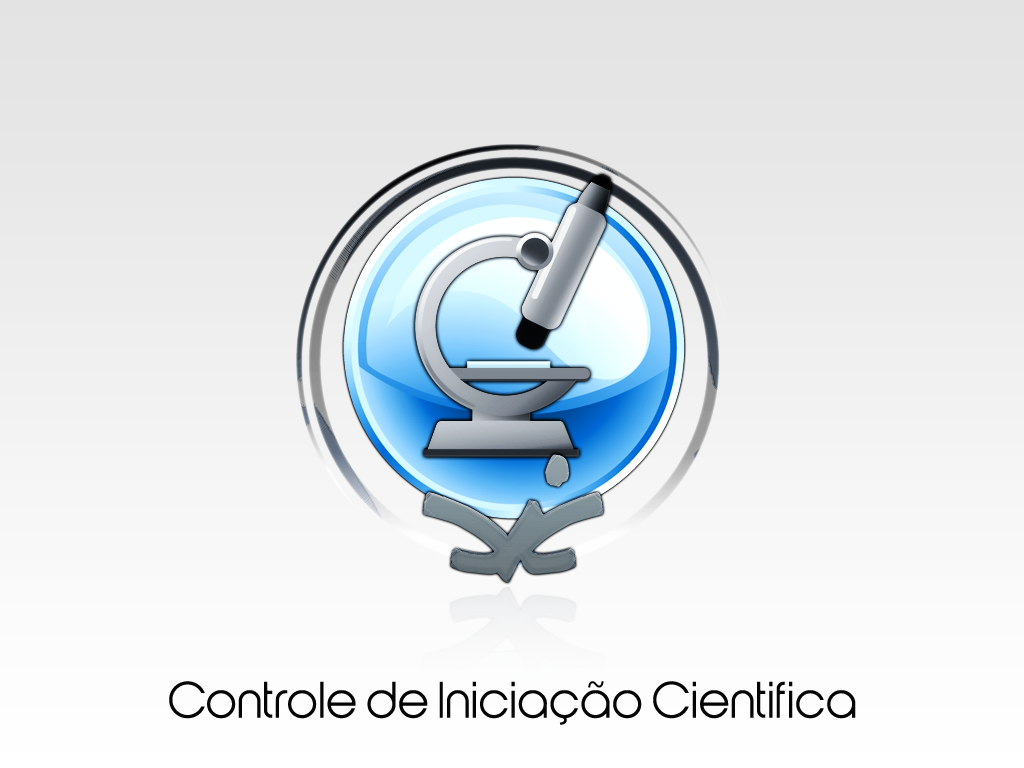
<style>
.page{position:relative;width:1024px;height:768px}
.page>*{position:absolute;margin:0}
.t1{font:48px "176MKSDAL";color:#040404}
.t2{font:24px "Verdana";color:#040404}
</style>
<div class="page">
<p class="t1" style="left:169px;top:681px;width:687px;height:38px">Controle de Iniciacao Cientifica</p>
<p class="t2" style="left:588px;top:681px;width:16px;height:7px">~</p>
</div>
